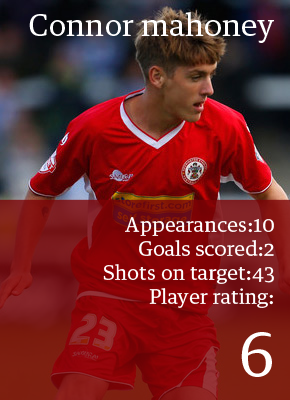
<style>
.page{position:relative;width:290px;height:400px}
.page>*{position:absolute;margin:0}
.t1{font:30px "TE32TextEgyptian";color:#ffffff}
.t2{font:20px "TE32TextEgyptian";color:#ffffff}
.t3{font:60px "TE32TextEgyptian";color:#ffffff}
</style>
<div class="page">
<p class="t1" style="left:29px;top:12px;width:245px;height:31px">Connor mahoney</p>
<p class="t2" style="left:103px;top:217px;width:171px;height:160px;text-align:right">Appearances:10<br>Goals scored:2<br>Shots on target:43<br>Player rating:<br><span class="t3">6</span></p>
</div>
